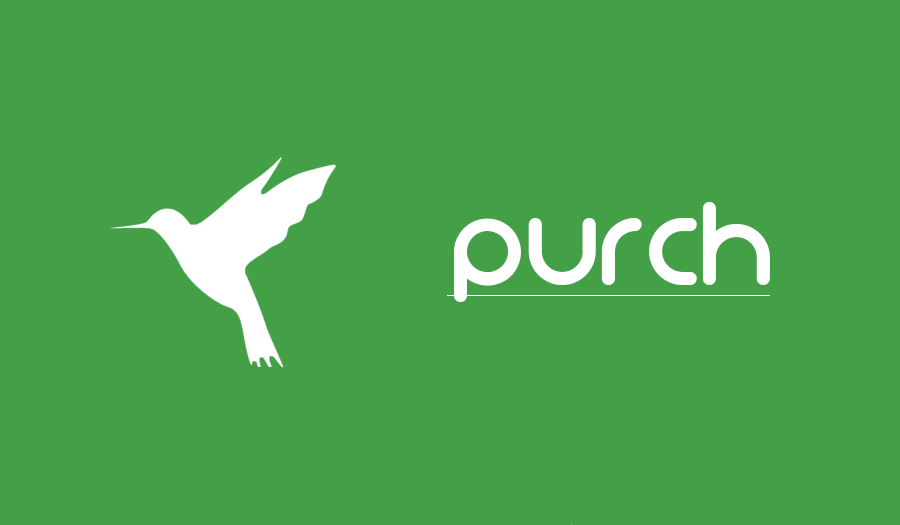
<style>
.page{position:relative;width:900px;height:525px;background:#43a047}
.page>*{position:absolute;margin:0}
.t1{font:104.2px "Organocoloredversionat:logomagazin.comorgano-font";color:#ffffff}
</style>
<div class="page">
<p class="t1" style="left:454px;top:202px;width:316px;height:100px">Purch</p>
</div>
